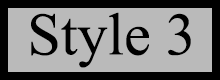
<style>
.page{position:relative;width:220px;height:80px;background:#bababa}
.page>*{position:absolute;margin:0}
.t1{font:60px "TimesNewRomanPSMT";color:#000000}
</style>
<div class="page">
<p class="t1" style="left:31px;top:12px;width:160px;height:56px">Style 3</p>
</div>
